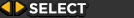
<style>
.page{position:relative;width:134px;height:18px;background:#333333}
.page>*{position:absolute;margin:0}
.t1{font:13.8px "Gotham-Medium";color:#ffffff;font-weight:bold}
</style>
<div class="page">
<p class="t1" style="left:29px;top:3px;width:57px;height:11px">SELECT</p>
</div>
